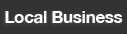
<style>
.page{position:relative;width:127px;height:34px;background:#333333}
.page>*{position:absolute;margin:0}
.t1{font:17px "HelveticaNeue-Bold";letter-spacing:-0.02em;color:#ffffff}
</style>
<div class="page">
<p class="t1" style="left:5px;top:11px;width:118px;height:13px">Local Business</p>
</div>
